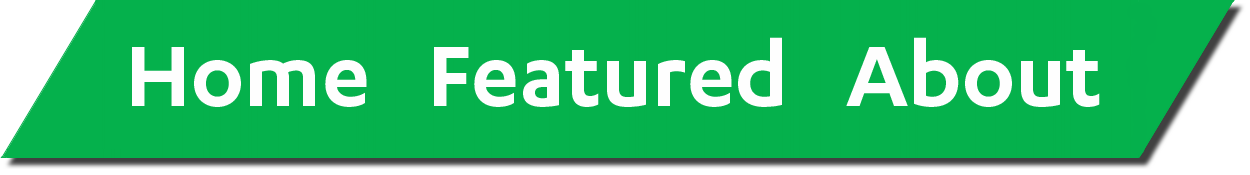
<style>
.page{position:relative;width:1250px;height:175px;background:#05b14c}
.page>*{position:absolute;margin:0}
.t1{font:100px "Karbon-Semibold";color:#fefefe}
</style>
<div class="page">
<p class="t1" style="left:132px;top:37px;width:968px;height:70px">Home   Featured   About</p>
</div>
